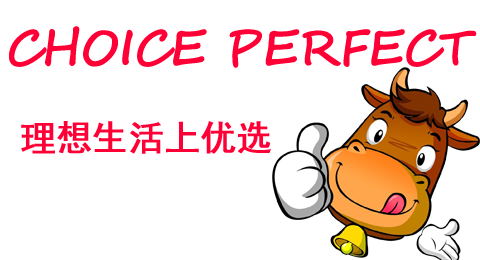
<style>
.page{position:relative;width:480px;height:260px;background:#ffffff}
.page>*{position:absolute;margin:0}
.t1{font:46.7px "SegoeScript";letter-spacing:-0.01em;color:#ff0036;text-transform:uppercase;font-weight:bold}
.t2{font:35.4px "SimHei";letter-spacing:-0.01em;color:#ff0036;text-transform:uppercase;font-weight:bold}
</style>
<div class="page">
<p class="t1" style="left:9px;top:26px;width:468px;height:42px">Choice Perfect</p>
<p class="t2" style="left:21px;top:121px;width:250px;height:33px">理想生活上优选</p>
</div>
